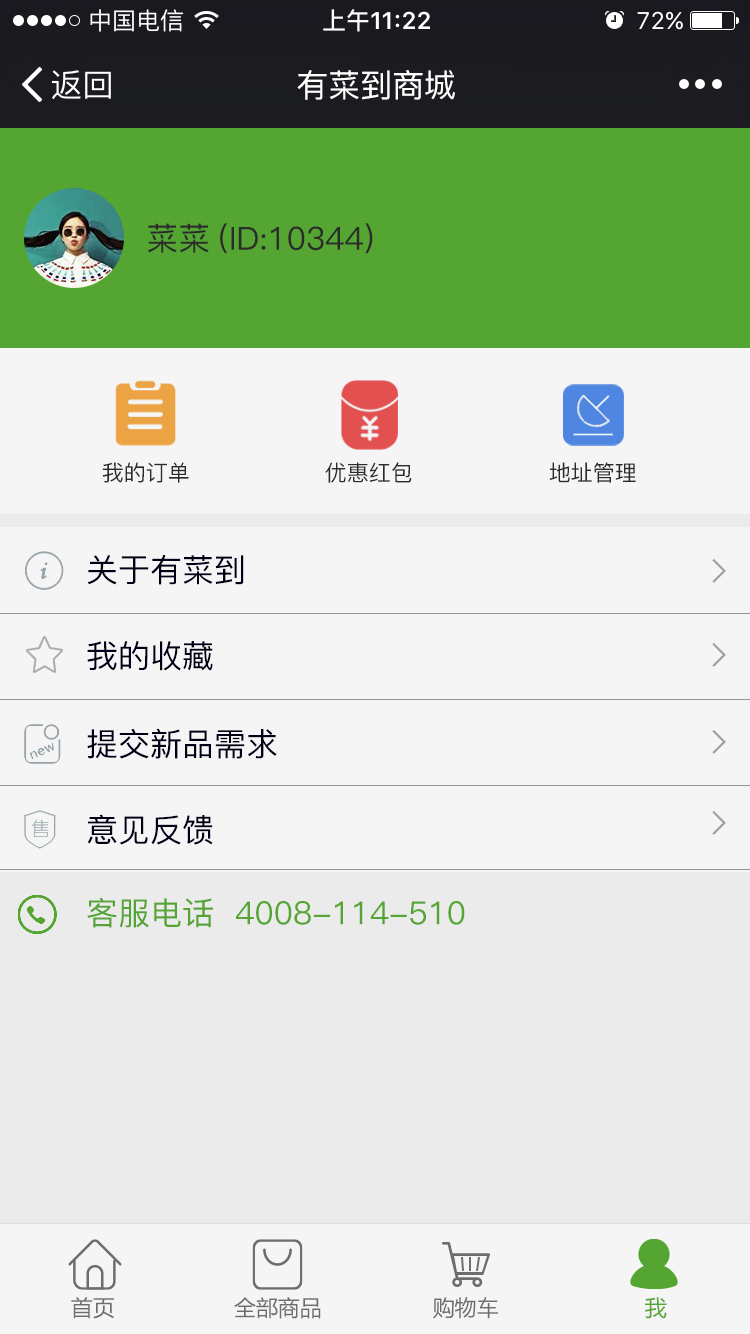
<style>
.page{position:relative;width:750px;height:1334px;background:#f5f5f5}
.page>*{position:absolute;margin:0}
.t1{font:32px "PingFang-SC-Medium";color:#ffffff}
.t2{font:32px "PingFang-SC-Medium";color:#2b2b2b}
.t3{font:22px "PingFang-SC-Medium";color:#2b2b2b}
.t4{font:32px "PingFang-SC-Medium";color:#000017}
.t5{font:32px "PingFang-SC-Medium";color:#55a533}
.t6{font:22px "MicrosoftYaHei";color:#6d6d6d}
.t7{font:22px "MicrosoftYaHei";color:#55a533}
</style>
<div class="page">
<p class="t1" style="left:297px;top:70px;width:158px;height:30px">有菜到商城</p>
<p class="t2" style="left:148px;top:223px;width:225px;height:31px">菜菜(ID:10344)</p>
<p class="t3" style="left:102px;top:462px;width:87px;height:21px">我的订单</p>
<p class="t3" style="left:325px;top:462px;width:87px;height:21px">优惠红包</p>
<p class="t3" style="left:549px;top:462px;width:87px;height:21px">地址管理</p>
<p class="t4" style="left:87px;top:555px;width:157px;height:30px">关于有菜到</p>
<p class="t4" style="left:87px;top:641px;width:126px;height:30px">我的收藏</p>
<p class="t4" style="left:87px;top:728px;width:190px;height:31px">提交新品需求</p>
<p class="t4" style="left:87px;top:814px;width:126px;height:31px">意见反馈</p>
<p class="t5" style="left:87px;top:898px;width:378px;height:30px">客服电话  4008-114-510</p>
<p class="t6" style="left:71px;top:1297px;width:43px;height:22px">首页</p>
<p class="t6" style="left:234px;top:1297px;width:87px;height:22px">全部商品</p>
<p class="t6" style="left:433px;top:1297px;width:65px;height:22px">购物车</p>
<p class="t7" style="left:645px;top:1297px;width:22px;height:22px">我</p>
</div>
